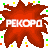
<style>
.page{position:relative;width:48px;height:48px;background:#ffffff}
.page>*{position:absolute;margin:0}
.t1{font:12.5px "PotrachenoRegular";color:#ffffff}
</style>
<div class="page">
<p class="t1" style="left:6px;top:19px;width:37px;height:8px">РЕКОРД</p>
</div>
